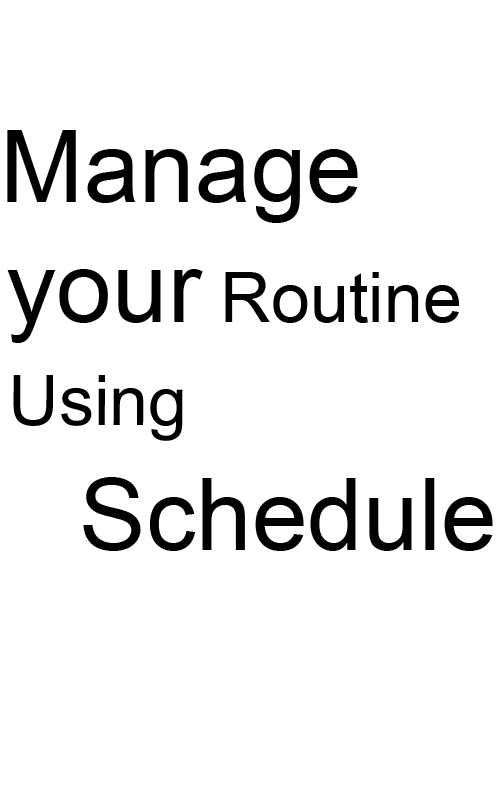
<style>
.page{position:relative;width:500px;height:800px;background:#ffffff}
.page>*{position:absolute;margin:0}
.t1{font:100px "ArialMT";color:#000000}
.t2{font:70px "ArialMT";color:#000000}
</style>
<div class="page">
<p class="t1" style="left:7px;top:130px;width:351px;height:93px">Manage</p>
<p class="t1" style="left:7px;top:269px;width:196px;height:74px">your</p>
<p class="t2" style="left:225px;top:272px;width:234px;height:51px">Routine</p>
<p class="t2" style="left:13px;top:375px;width:170px;height:66px">Using</p>
<p class="t1" style="left:83px;top:477px;width:410px;height:74px">Schedule</p>
</div>
